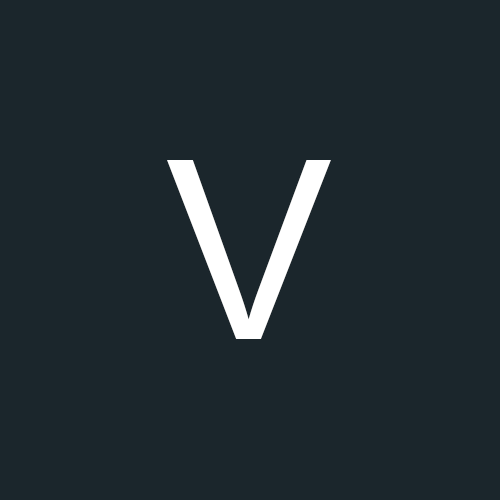
<style>
.page{position:relative;width:500px;height:500px;background:#1b262c}
.page>*{position:absolute;margin:0}
.t1{font:250px "ArialMT";color:#ffffff}
</style>
<div class="page">
<p class="t1" style="left:167px;top:160px;width:164px;height:179px">V</p>
</div>
